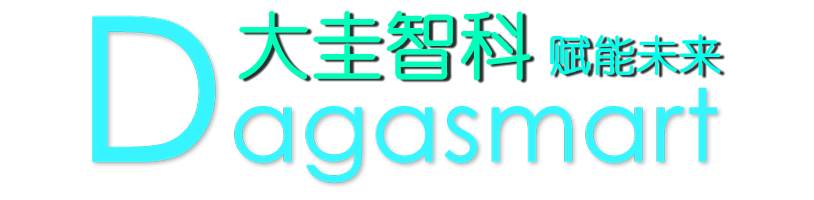
<style>
.page{position:relative;width:814px;height:200px;background:#ffffff}
.page>*{position:absolute;margin:0}
.t1{font:72.2px "YouYuan";color:#00ffba;font-weight:bold}
.t2{font:42.1px "YouYuan";color:#00ffea;font-weight:bold}
</style>
<div class="page">
<p class="t1" style="left:238px;top:10px;width:483px;height:71px">大圭智科 <span class="t2">赋能未来</span></p>
</div>
